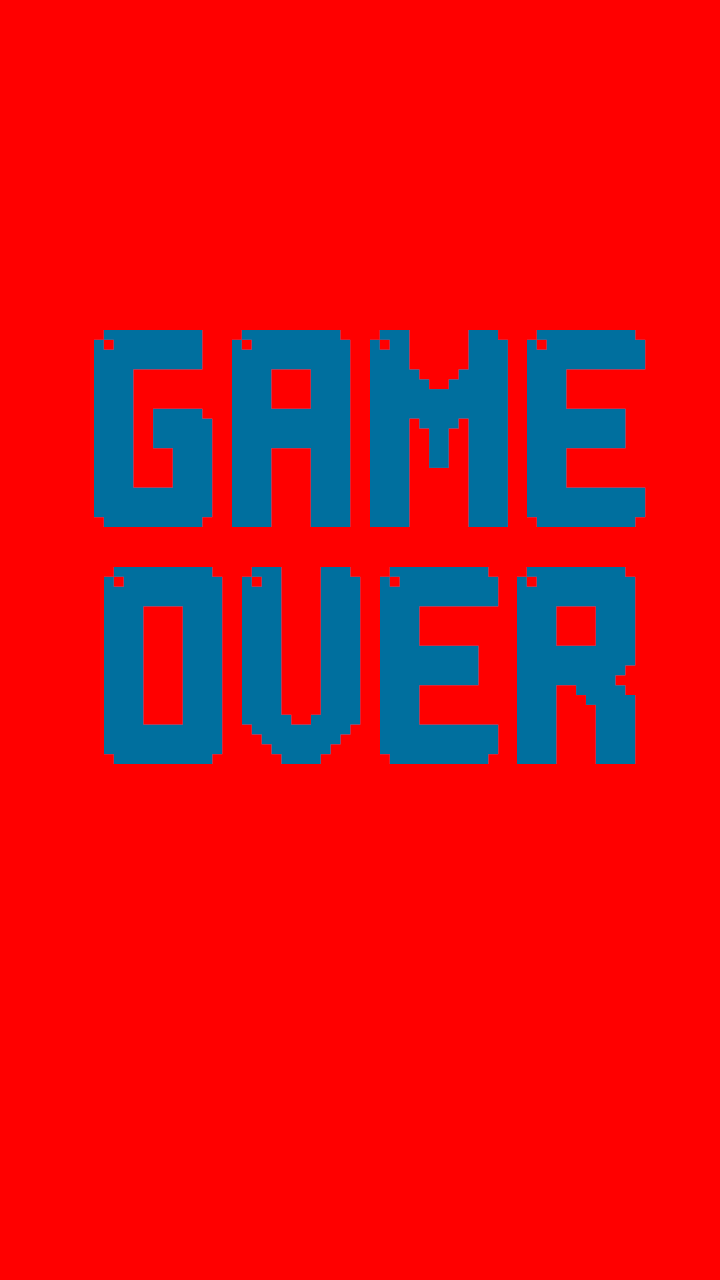
<style>
.page{position:relative;width:720px;height:1280px;background:#ff0000}
.page>*{position:absolute;margin:0}
.t1{font:197.2px "LightPixel-7";color:#006f9e}
</style>
<div class="page">
<p class="t1" style="left:94px;top:330px;width:552px;height:434px;text-align:center">GAME<br>OVER</p>
</div>
